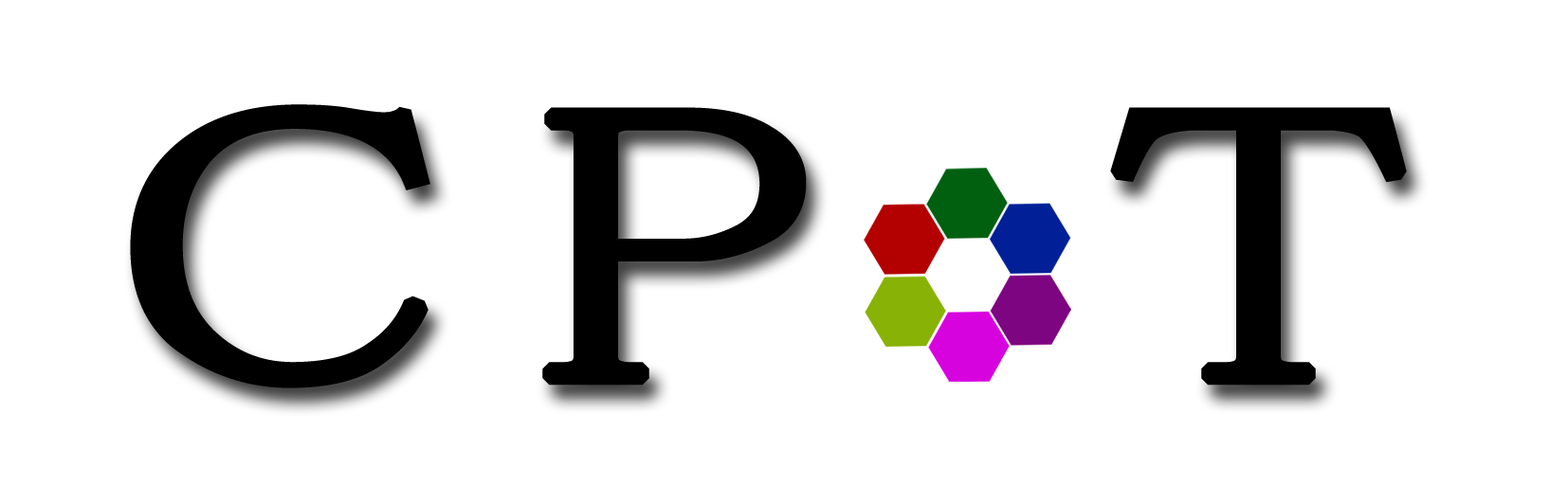
<style>
.page{position:relative;width:1568px;height:503px;background:#ffffff}
.page>*{position:absolute;margin:0}
.t1{font:395px "MS-PMincho";letter-spacing:0.12em;color:#000000;font-weight:bold;scale:1.26 1}
</style>
<div class="page">
<p class="t1" style="left:130px;top:104px;width:1277px;height:285px">CP T</p>
</div>
